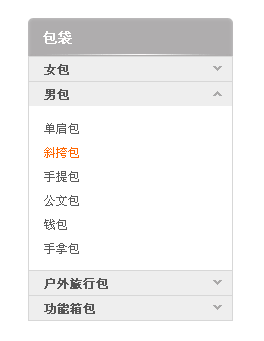
<style>
.page{position:relative;width:264px;height:341px;background:#ffffff}
.page>*{position:absolute;margin:0}
.t1{font:14px "NSimSun";color:#ffffff;font-weight:bold}
.t2{font:12px "NSimSun";color:#555555;font-weight:bold}
.t3{font:12px/24px "NSimSun";color:#5b5b5b}
.t4{font:12px/24px "NSimSun";color:#ff6600}
</style>
<div class="page">
<p class="t1" style="left:43px;top:31px;width:29px;height:13px">包袋</p>
<p class="t2" style="left:44px;top:64px;width:25px;height:11px">女包</p>
<p class="t2" style="left:44px;top:89px;width:25px;height:11px">男包</p>
<p class="t3" style="left:44px;top:123px;width:35px;height:131px">单肩包<br><span class="t4">斜挎包<br></span>手提包<br>公文包<br>钱包<br>手拿包</p>
<p class="t2" style="left:44px;top:278px;width:64px;height:11px">户外旅行包</p>
<p class="t2" style="left:44px;top:303px;width:51px;height:11px">功能箱包</p>
</div>
